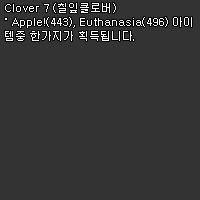
<style>
.page{position:relative;width:200px;height:200px;background:#333333}
.page>*{position:absolute;margin:0}
.t1{font:11px/14px "Dotum";color:#ffffff}
</style>
<div class="page">
<p class="t1" style="left:5px;top:3px;width:187px;height:38px">Clover 7 (칠잎클로버)<br>˚ Apple!(443), Euthanasia(496) 아이<br>템중 한가지가 획득됩니다.</p>
</div>
